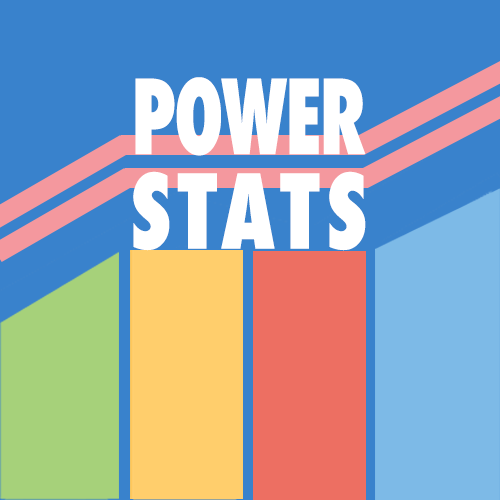
<style>
.page{position:relative;width:500px;height:500px;background:#3982cc}
.page>*{position:absolute;margin:0}
.t1{font:100px/94.7px "Futura-CondensedExtraBold";letter-spacing:-0.02em;color:#ffffff;scale:0.77 1}
.t2{font:100px/94.7px "Futura-CondensedExtraBold";letter-spacing:0.06em;color:#ffffff;scale:0.9 1}
</style>
<div class="page">
<p class="t1" style="left:133px;top:77px;width:233px;height:174px;text-align:center">POWER<br><span class="t2">STATS</span></p>
</div>
